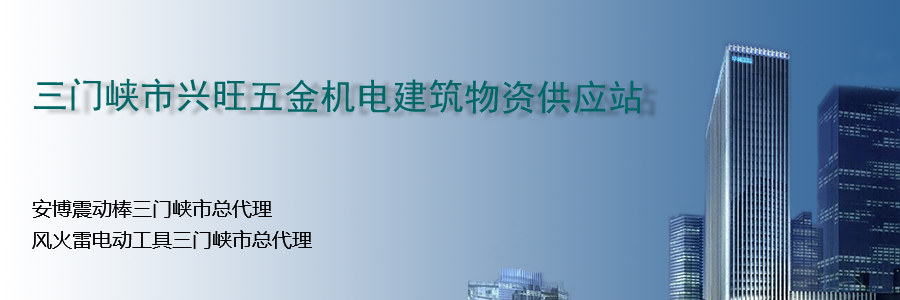
<style>
.page{position:relative;width:900px;height:300px}
.page>*{position:absolute;margin:0}
.t1{font:36px "SimHei";color:#006666}
.t2{font:20px "MicrosoftYaHei";color:#000000}
</style>
<div class="page">
<p class="t1" style="left:34px;top:78px;width:609px;height:36px">三门峡市兴旺五金机电建筑物资供应站</p>
<p class="t2" style="left:32px;top:199px;width:240px;height:19px">安博震动棒三门峡市总代理</p>
<p class="t2" style="left:32px;top:230px;width:280px;height:19px">风火雷电动工具三门峡市总代理</p>
</div>
